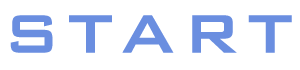
<style>
.page{position:relative;width:300px;height:70px;background:#ffffff}
.page>*{position:absolute;margin:0}
.t1{font:72px "BankGothicBT-Medium";letter-spacing:0.1em;color:#6a8ee0}
</style>
<div class="page">
<p class="t1" style="left:10px;top:15px;width:282px;height:38px">START</p>
</div>
